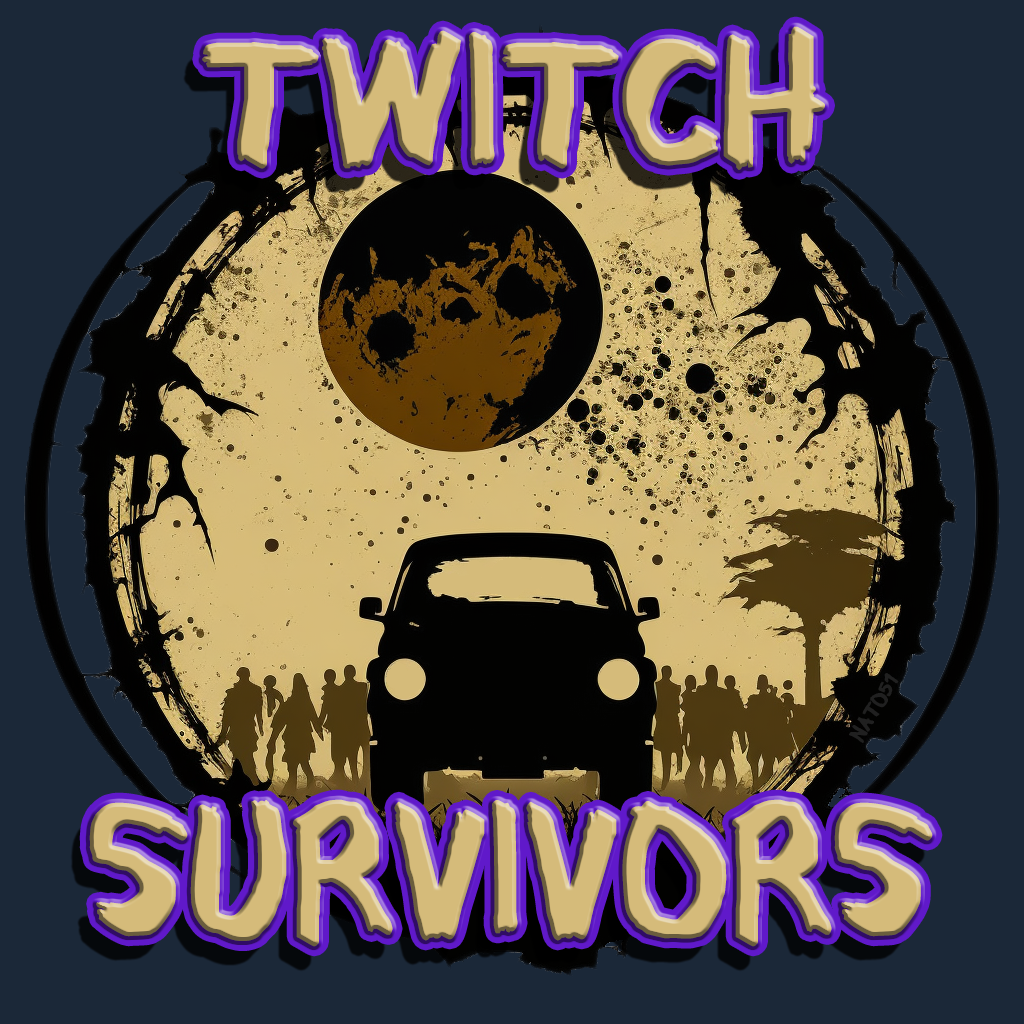
<style>
.page{position:relative;width:1024px;height:1024px;background:#1b2838}
.page>*{position:absolute;margin:0}
.t1{font:160px "CFRebelle-Regular";color:#d5bb7a;font-weight:bold}
.t2{font:20px "CFRebelle-Regular";color:#202020;font-weight:bold}
</style>
<div class="page">
<p class="t1" style="left:89px;top:26px;width:844px;height:921px;text-align:center">TWITCH<br><br><br><br>SURVIVORS</p>
<p class="t2" style="left:849px;top:673px;width:50px;height:70px;rotate:-60deg">Nato51</p>
</div>
